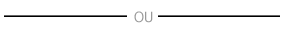
<style>
.page{position:relative;width:282px;height:31px;background:#ffffff}
.page>*{position:absolute;margin:0}
.t1{font:14px "Tahoma";color:#999999}
</style>
<div class="page">
<p class="t1" style="left:134px;top:11px;width:19px;height:12px">OU</p>
</div>
